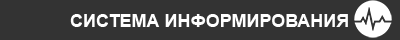
<style>
.page{position:relative;width:400px;height:40px;background:#333333}
.page>*{position:absolute;margin:0}
.t1{font:18px "Arial-BoldMT";color:#ffffff}
</style>
<div class="page">
<p class="t1" style="left:70px;top:14px;width:278px;height:13px">СИСТЕМА ИНФОРМИРОВАНИЯ</p>
</div>
